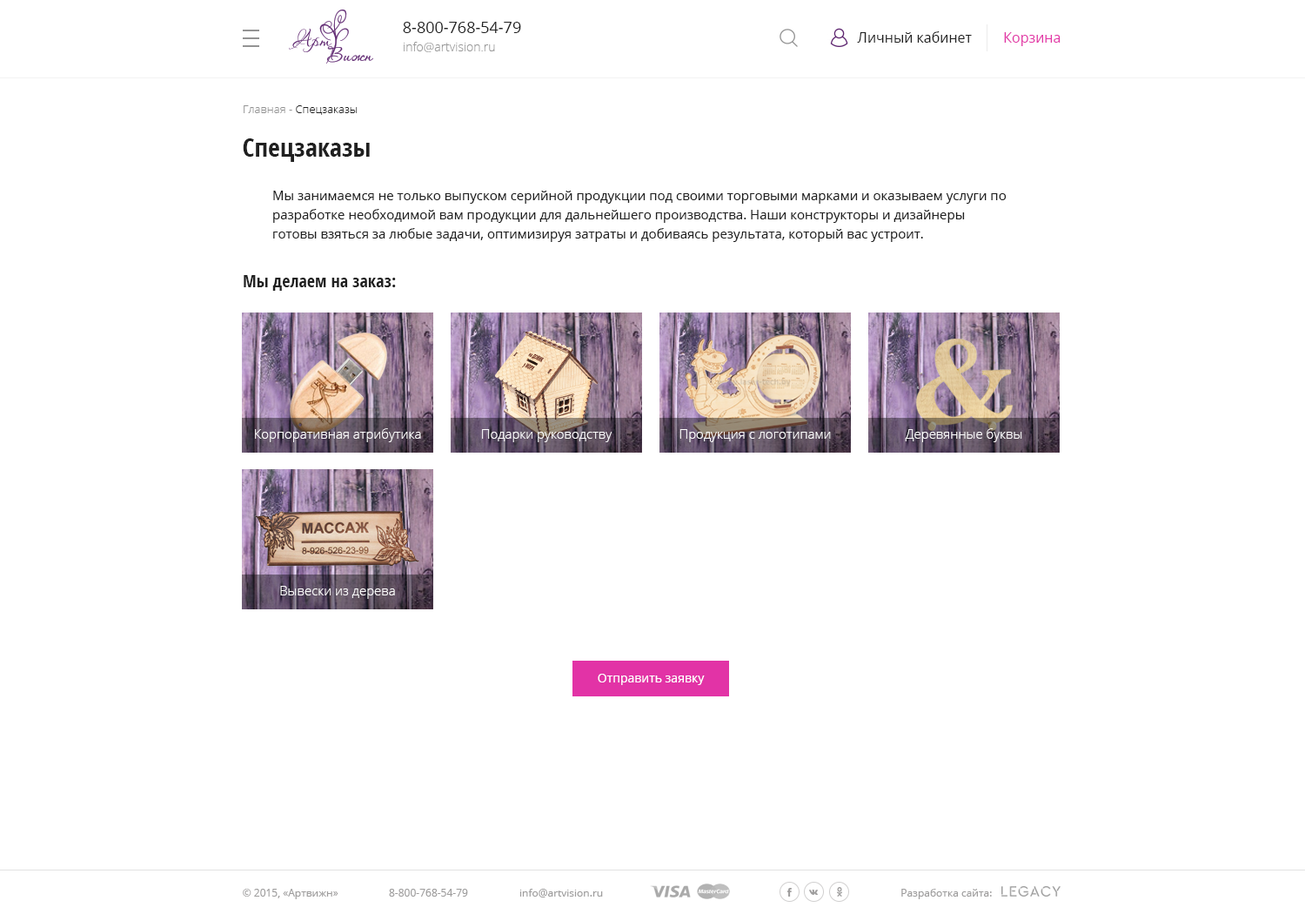
<style>
.page{position:relative;width:1305px;height:914px;background:#ffffff}
.page>*{position:absolute;margin:0}
.t1{font:15.7px "OpenSans";color:#202020}
.t2{font:12.2px "OpenSans-Light";color:#999999}
.t3{font:13.9px "OpenSans";color:#202020}
.t4{font:13.9px "OpenSans";color:#e233a6}
.t5{font:11.3px "OpenSans-Light";color:#202020}
.t6{font:11.3px "OpenSans-Light";color:#939393}
.t7{font:26.1px "OpenSans-CondensedBold";color:#202020}
.t8{font:13.1px/19.1px "OpenSans";color:#202020}
.t9{font:17.4px "OpenSans-CondensedBold";color:#202020}
.t10{font:13.1px "OpenSans-Light";color:#ffffff}
.t11{font:12.2px "OpenSans";color:#ffffff}
.t12{font:10.4px "OpenSans";color:#9e9d9d}
</style>
<div class="page">
<p class="t1" style="left:403px;top:22px;width:118px;height:11px">8-800-768-54-79</p>
<p class="t2" style="left:404px;top:42px;width:91px;height:10px">info@artvision.ru</p>
<p class="t3" style="left:857px;top:31px;width:115px;height:12px">Личный кабинет</p>
<p class="t4" style="left:1004px;top:32px;width:57px;height:14px">Корзина</p>
<p class="t5" style="left:244px;top:105px;width:114px;height:10px"><span class="t6">Главная - </span>Спецзаказы</p>
<p class="t7" style="left:243px;top:138px;width:127px;height:24px">Спецзаказы</p>
<p class="t8" style="left:273px;top:191px;width:734px;height:51px">Мы занимаемся не только выпуском серийной продукции под своими торговыми марками и оказываем услуги по разработке необходимой вам продукции для дальнейшего производства. Наши конструкторы и дизайнеры готовы взяться за любые задачи, оптимизируя затраты и добиваясь результата, который вас устроит.</p>
<p class="t9" style="left:244px;top:275px;width:152px;height:16px">Мы делаем на заказ:</p>
<p class="t10" style="left:255px;top:428px;width:166px;height:14px">Корпоративная атрибутика</p>
<p class="t10" style="left:482px;top:429px;width:131px;height:13px">Подарки руководству</p>
<p class="t10" style="left:680px;top:429px;width:151px;height:13px">Продукция с логотипами</p>
<p class="t10" style="left:905px;top:428px;width:117px;height:14px">Деревянные буквы</p>
<p class="t10" style="left:280px;top:586px;width:115px;height:13px">Вывески из дерева</p>
<p class="t11" style="left:598px;top:673px;width:107px;height:12px">Отправить заявку</p>
<p class="t12" style="left:243px;top:888px;width:95px;height:11px">© 2015, «Артвижн»</p>
<p class="t12" style="left:389px;top:888px;width:79px;height:8px">8-800-768-54-79</p>
<p class="t12" style="left:519px;top:888px;width:84px;height:9px">info@artvision.ru</p>
<p class="t12" style="left:901px;top:888px;width:91px;height:11px">Разработка сайта:</p>
</div>
